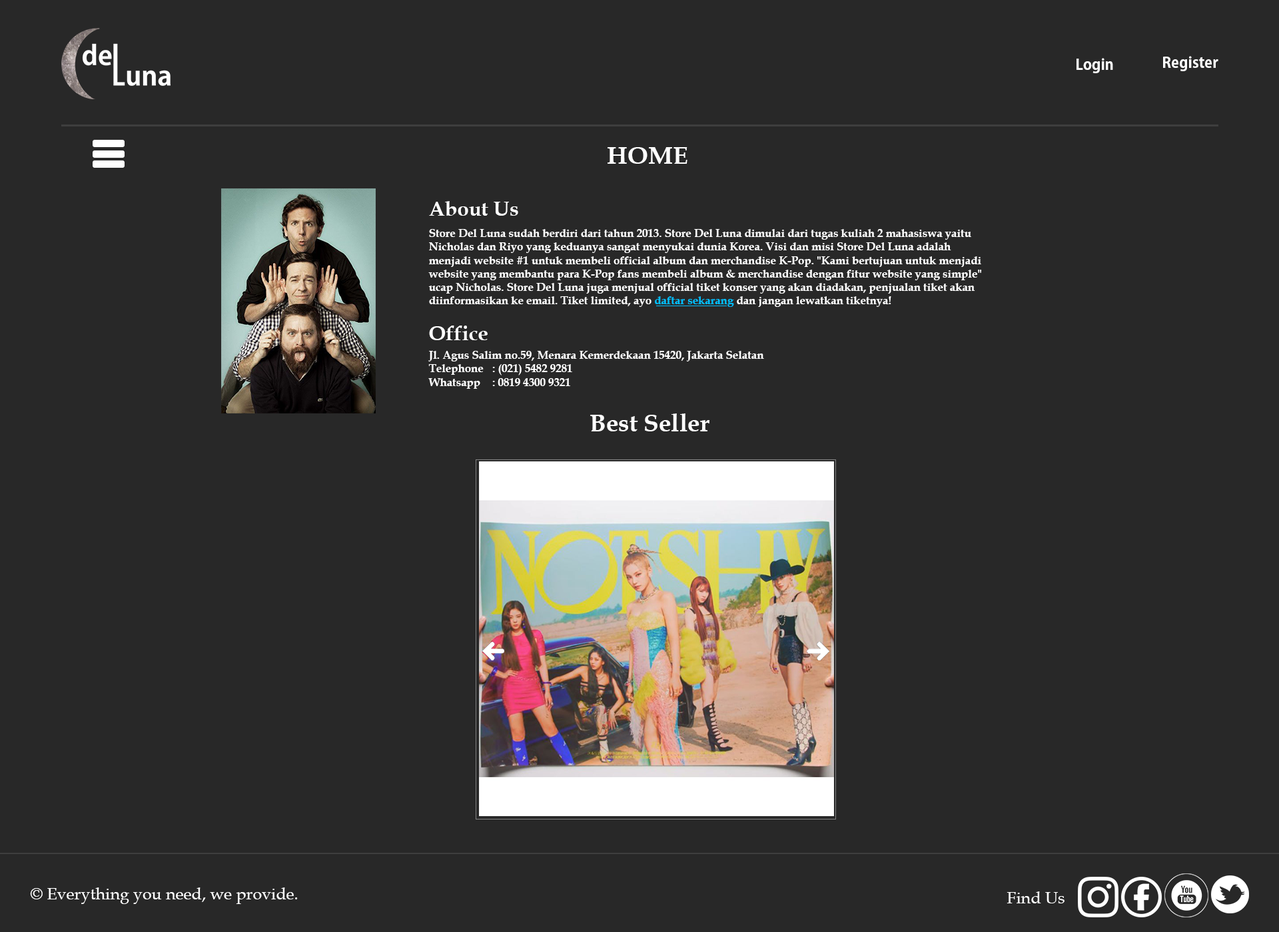
<style>
.page{position:relative;width:1279px;height:932px;background:#282828}
.page>*{position:absolute;margin:0}
.t1{font:14.7px "KozGoPr6N-Bold";color:#ffffff}
.t2{font:24.6px "BookAntiqua-Bold";color:#ffffff}
.t3{font:20.6px "BookAntiqua-Bold";color:#ffffff}
.t4{font:11.2px "BookAntiqua-Bold";color:#ffffff}
.t5{font:11.2px "BookAntiqua-Bold";color:#00bfff}
.t6{font:16.7px "BookAntiqua";color:#ffffff}
</style>
<div class="page">
<p class="t1" style="left:1076px;top:58px;width:37px;height:15px">Login</p>
<p class="t1" style="left:1163px;top:56px;width:55px;height:15px">Register</p>
<p class="t2" style="left:607px;top:147px;width:80px;height:17px">HOME</p>
<p class="t3" style="left:429px;top:201px;width:89px;height:15px">About Us</p>
<p class="t4" style="left:428px;top:229px;width:554px;height:78px">Store Del Luna sudah berdiri dari tahun 2013. Store Del Luna dimulai dari tugas kuliah 2 mahasiswa yaitu Nicholas dan Riyo yang keduanya sangat menyukai dunia Korea. Visi dan misi Store Del Luna adalah menjadi website #1 untuk membeli official album dan merchandise K-Pop. "Kami bertujuan untuk menjadi website yang membantu para K-Pop fans membeli album &amp; merchandise dengan fitur website yang simple" ucap Nicholas. Store Del Luna juga menjual official tiket konser yang akan diadakan, penjualan tiket akan diinformasikan ke email. Tiket limited, ayo <span class="t5">daftar sekarang</span> dan jangan lewatkan tiketnya!</p>
<p class="t3" style="left:429px;top:326px;width:59px;height:14px">Office</p>
<p class="t4" style="left:428px;top:351px;width:336px;height:38px">Jl. Agus Salim no.59, Menara Kemerdekaan 15420, Jakarta Selatan<br>Telephone : (021) 5482 9281<br>Whatsapp : 0819 4300 9321</p>
<p class="t2" style="left:590px;top:414px;width:119px;height:18px">Best Seller</p>
<p class="t6" style="left:30px;top:888px;width:268px;height:16px">© Everything you need, we provide.</p>
<p class="t6" style="left:1006px;top:892px;width:58px;height:12px">Find Us</p>
</div>
